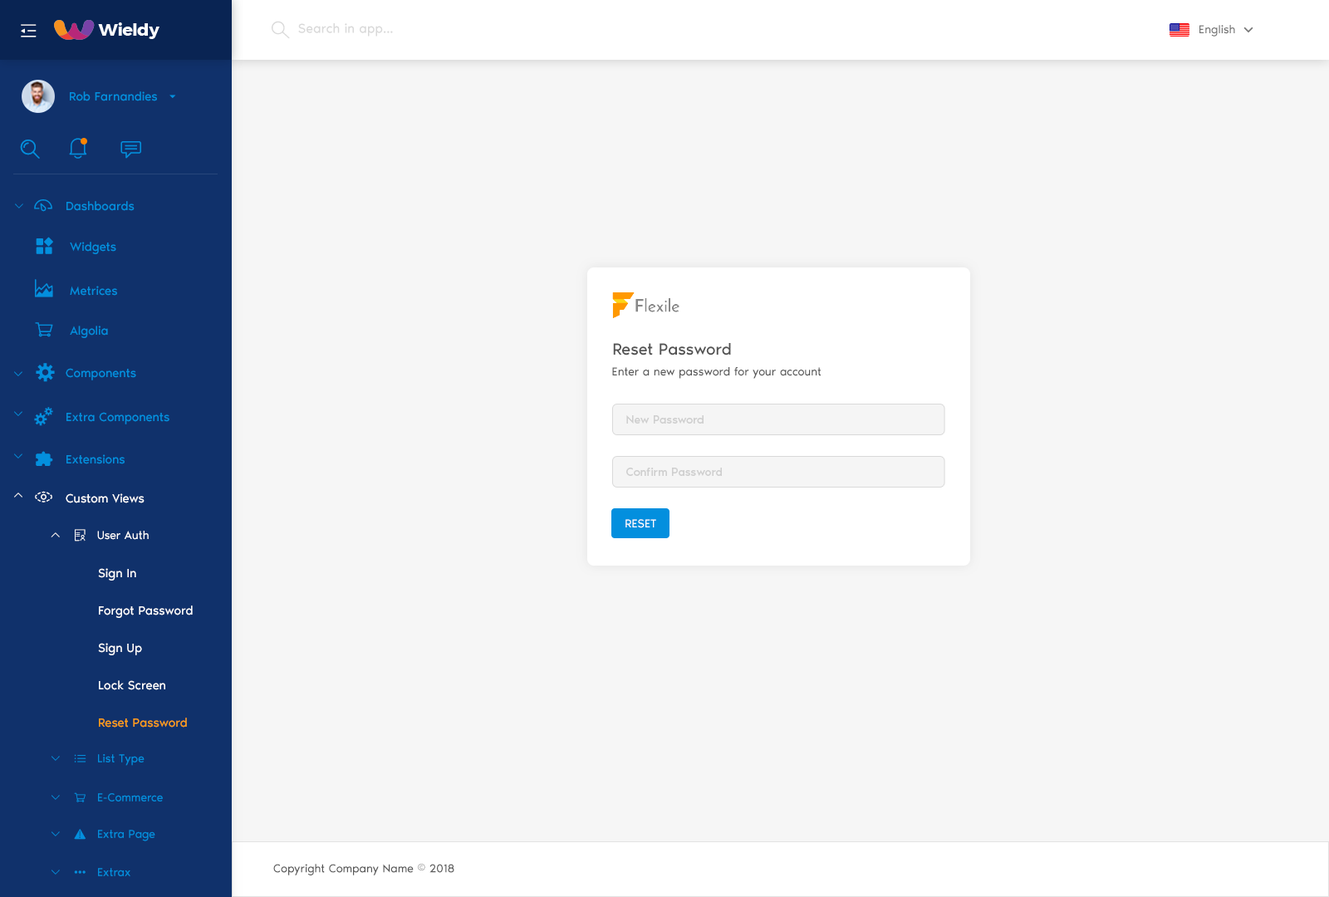
<style>
.page{position:relative;width:1329px;height:897px;background:#f6f6f6}
.page>*{position:absolute;margin:0}
.t1{font:13.3px "NoirPro-Regular";color:#d9d9d9}
.t2{font:11.6px "NoirPro-Regular";color:#757575}
.t3{font:12.5px "NoirPro-Regular";color:#038fde}
.t4{font:10px "gaxonant"}
.t5{font:18.3px "gaxonant";color:#038fde}
.t6{font:16.6px "NoirPro-Regular";color:#535353}
.t7{font:9.7px "gaxonant";color:#038fde}
.t8{font:11.6px "NoirPro-Regular";color:#595959}
.t9{font:11.6px "NoirPro-Regular";color:#cfcfcf}
.t10{font:18.3px "gaxonant";color:#ffffff}
.t11{font:12.5px "NoirPro-Regular";color:#ffffff}
.t12{font:11.6px "NoirPro-Regular";color:#ffffff}
.t13{font:10px "gaxonant";color:#ffffff}
.t14{font:11.6px "gaxonant";color:#ffffff}
.t15{font:12.5px/33.2px "NoirPro-Regular";color:#ffffff}
.t16{font:12.5px/33.2px "NoirPro-Regular";color:#fe9e15}
.t17{font:10px "gaxonant";color:#038fde}
.t18{font:11.6px "gaxonant";color:#038fde}
.t19{font:11.6px "NoirPro-Regular";color:#038fde}
</style>
<div class="page">
<p class="t1" style="left:298px;top:23px;width:95px;height:14px">Search in app...</p>
<p class="t2" style="left:1200px;top:25px;width:35px;height:12px">English</p>
<p class="t3" style="left:70px;top:91px;width:87px;height:10px">Rob Farnandies</p>
<p class="t4" style="left:15px;top:204px;width:8px;height:5px">2</p>
<p class="t5" style="left:34px;top:199px;width:18px;height:13px">-</p>
<p class="t3" style="left:66px;top:201px;width:69px;height:10px">Dashboards</p>
<p class="t3" style="left:70px;top:242px;width:46px;height:12px">Widgets</p>
<p class="t5" style="left:35px;top:279px;width:18px;height:18px">m</p>
<p class="t3" style="left:70px;top:286px;width:47px;height:10px">Metrices</p>
<p class="t3" style="left:70px;top:326px;width:38px;height:12px">Algolia</p>
<p class="t6" style="left:613px;top:343px;width:118px;height:13px">Reset Password</p>
<p class="t5" style="left:36px;top:363px;width:19px;height:19px">%</p>
<p class="t7" style="left:14px;top:371px;width:8px;height:5px">2</p>
<p class="t3" style="left:66px;top:368px;width:70px;height:12px">Components</p>
<p class="t8" style="left:612px;top:367px;width:209px;height:12px">Enter a new password for your account</p>
<p class="t7" style="left:14px;top:411px;width:8px;height:5px">2</p>
<p class="t3" style="left:66px;top:412px;width:103px;height:12px">Extra Components</p>
<p class="t9" style="left:626px;top:415px;width:78px;height:9px">New Password</p>
<p class="t7" style="left:14px;top:454px;width:8px;height:5px">2</p>
<p class="t3" style="left:66px;top:454px;width:59px;height:10px">Extensions</p>
<p class="t9" style="left:626px;top:468px;width:96px;height:8px">Confirm Password</p>
<p class="t4" style="left:14px;top:493px;width:8px;height:5px">5</p>
<p class="t10" style="left:35px;top:491px;width:17px;height:12px">,</p>
<p class="t11" style="left:66px;top:493px;width:79px;height:10px">Custom Views</p>
<p class="t12" style="left:626px;top:519px;width:30px;height:9px">RESET</p>
<p class="t13" style="left:51px;top:532px;width:9px;height:5px">5</p>
<p class="t14" style="left:75px;top:529px;width:11px;height:13px">r</p>
<p class="t12" style="left:97px;top:531px;width:52px;height:9px">User Auth</p>
<p class="t15" style="left:98px;top:568px;width:95px;height:160px">Sign In<br>Forgot Password<br>Sign Up<br>Lock Screen<br><span class="t16">Reset Password</span></p>
<p class="t17" style="left:52px;top:756px;width:8px;height:5px">2</p>
<p class="t18" style="left:74px;top:754px;width:12px;height:9px">h</p>
<p class="t19" style="left:98px;top:754px;width:47px;height:12px">List Type</p>
<p class="t17" style="left:52px;top:795px;width:8px;height:5px">2</p>
<p class="t19" style="left:98px;top:793px;width:65px;height:9px">E-Commerce</p>
<p class="t17" style="left:52px;top:832px;width:8px;height:5px">2</p>
<p class="t18" style="left:74px;top:829px;width:12px;height:11px">~</p>
<p class="t19" style="left:98px;top:830px;width:57px;height:12px">Extra Page</p>
<p class="t17" style="left:52px;top:870px;width:8px;height:5px">2</p>
<p class="t19" style="left:98px;top:868px;width:32px;height:8px">Extrax</p>
<p class="t8" style="left:273px;top:864px;width:181px;height:12px">Copyright Company Name © 2018</p>
<p class="t18" style="left:74px;top:871px;width:12px;height:3px">{</p>
</div>
